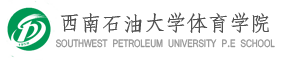
<style>
.page{position:relative;width:300px;height:60px;background:#ffffff}
.page>*{position:absolute;margin:0}
.t1{font:20.8px "AdobeFangsongStd-Regular";letter-spacing:0.02em;color:#505050}
.t2{font:11.5px "Vrinda";letter-spacing:-0.02em;color:#969696;scale:0.81 1}
</style>
<div class="page">
<p class="t1" style="left:60px;top:12px;width:209px;height:21px">西南石油大学体育学院</p>
<p class="t2" style="left:56px;top:39px;width:219px;height:9px">SOUTHWEST PETROLEUM UNIVERSITY P.E SCHOOL</p>
</div>
